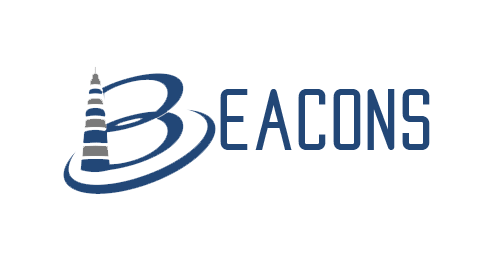
<style>
.page{position:relative;width:490px;height:254px;background:#ffffff}
.page>*{position:absolute;margin:0}
.t1{font:60px "Nike200204";letter-spacing:-0.025em;color:#224777;text-transform:uppercase}
</style>
<div class="page">
<p class="t1" style="left:220px;top:89px;width:210px;height:61px">eacons</p>
</div>
